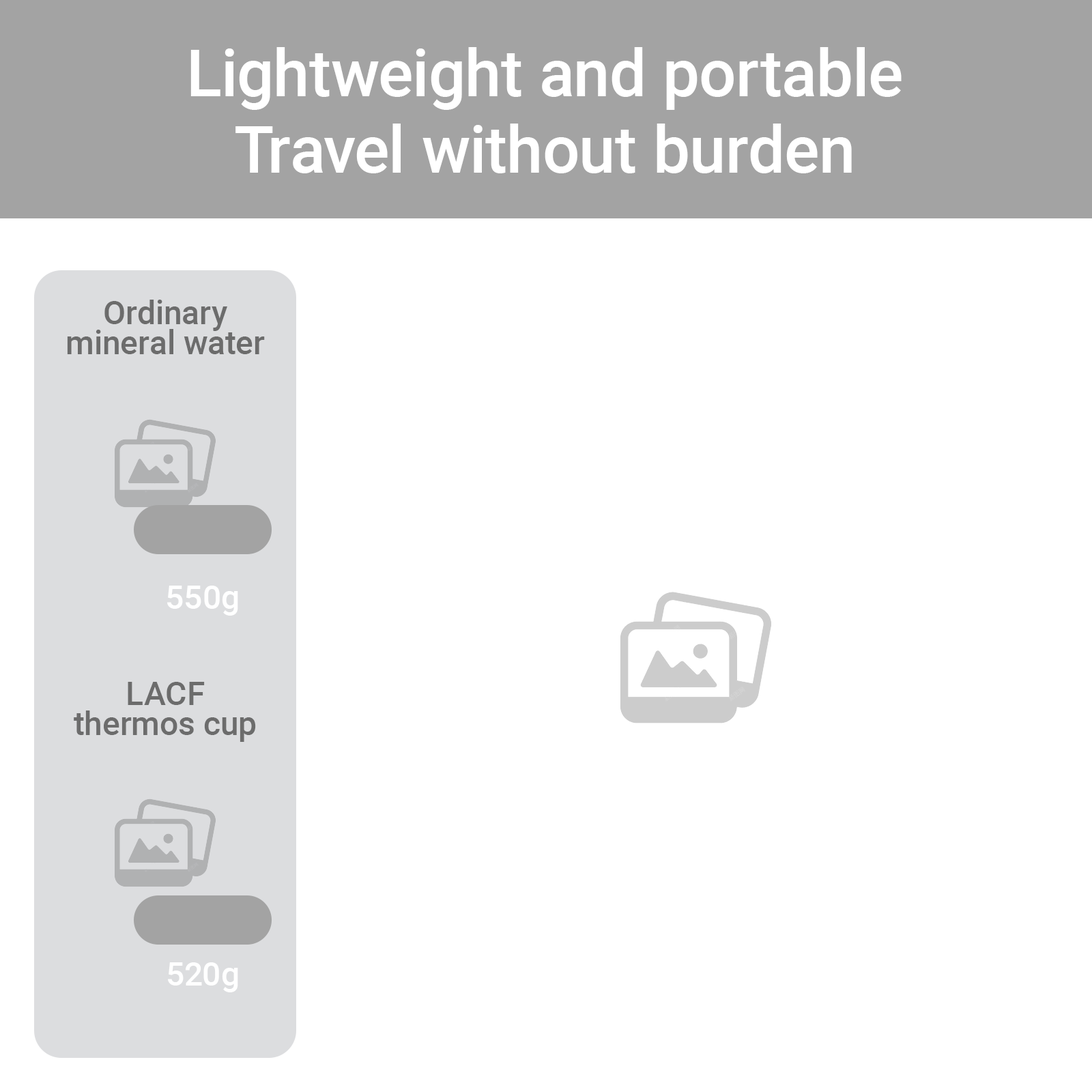
<style>
.page{position:relative;width:1092px;height:1092px;background:#ffffff}
.page>*{position:absolute;margin:0}
.t1{font:65.5px/76.4px "Roboto-Medium";color:#ffffff}
.t2{font:32.8px/30px "Roboto-Medium";color:#6c6c6c}
.t3{font:32.8px "Roboto-Medium";color:#ffffff}
</style>
<div class="page">
<p class="t1" style="left:190px;top:47px;width:712px;height:126px;text-align:center">Lightweight and portable<br>Travel without burden</p>
<p class="t2" style="left:67px;top:300px;width:198px;height:54px;text-align:center">Ordinary<br>mineral water</p>
<p class="t3" style="left:167px;top:586px;width:71px;height:30px">550g</p>
<p class="t2" style="left:74px;top:682px;width:182px;height:60px;text-align:center">LACF<br>thermos cup</p>
<p class="t3" style="left:168px;top:962px;width:70px;height:30px">520g</p>
</div>
